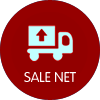
<style>
.page{position:relative;width:100px;height:100px;background:#930000}
.page>*{position:absolute;margin:0}
.t1{font:14px "FZY3JW--GB1-0";color:#ffffff;text-transform:uppercase}
</style>
<div class="page">
<p class="t1" style="left:24px;top:72px;width:52px;height:10px">sale net</p>
</div>
